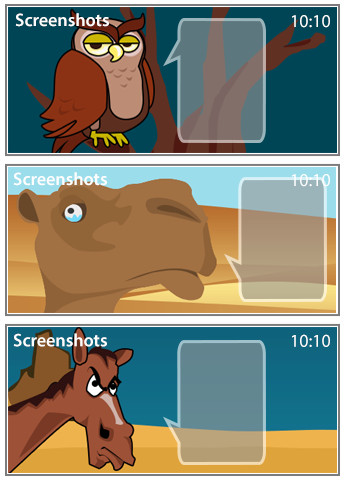
<style>
.page{position:relative;width:345px;height:480px}
.page>*{position:absolute;margin:0}
.t1{font:18px "MyriadPro-Semibold";color:#ffffff}
.t2{font:18px "MyriadPro-Regular";color:#ffffff}
</style>
<div class="page">
<p class="t1" style="left:15px;top:13px;width:94px;height:14px">Screenshots</p>
<p class="t2" style="left:292px;top:15px;width:38px;height:13px">10:10</p>
<p class="t1" style="left:13px;top:172px;width:94px;height:14px">Screenshots</p>
<p class="t2" style="left:292px;top:174px;width:38px;height:13px">10:10</p>
<p class="t1" style="left:13px;top:333px;width:94px;height:14px">Screenshots</p>
<p class="t2" style="left:292px;top:334px;width:38px;height:13px">10:10</p>
</div>
